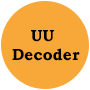
<style>
.page{position:relative;width:90px;height:90px;background:#f8a839}
.page>*{position:absolute;margin:0}
.t1{font:16px "BookmanOldStyle-Bold";color:#000000}
</style>
<div class="page">
<p class="t1" style="left:31px;top:30px;width:23px;height:12px">UU</p>
<p class="t1" style="left:12px;top:48px;width:68px;height:13px">Decoder</p>
</div>
